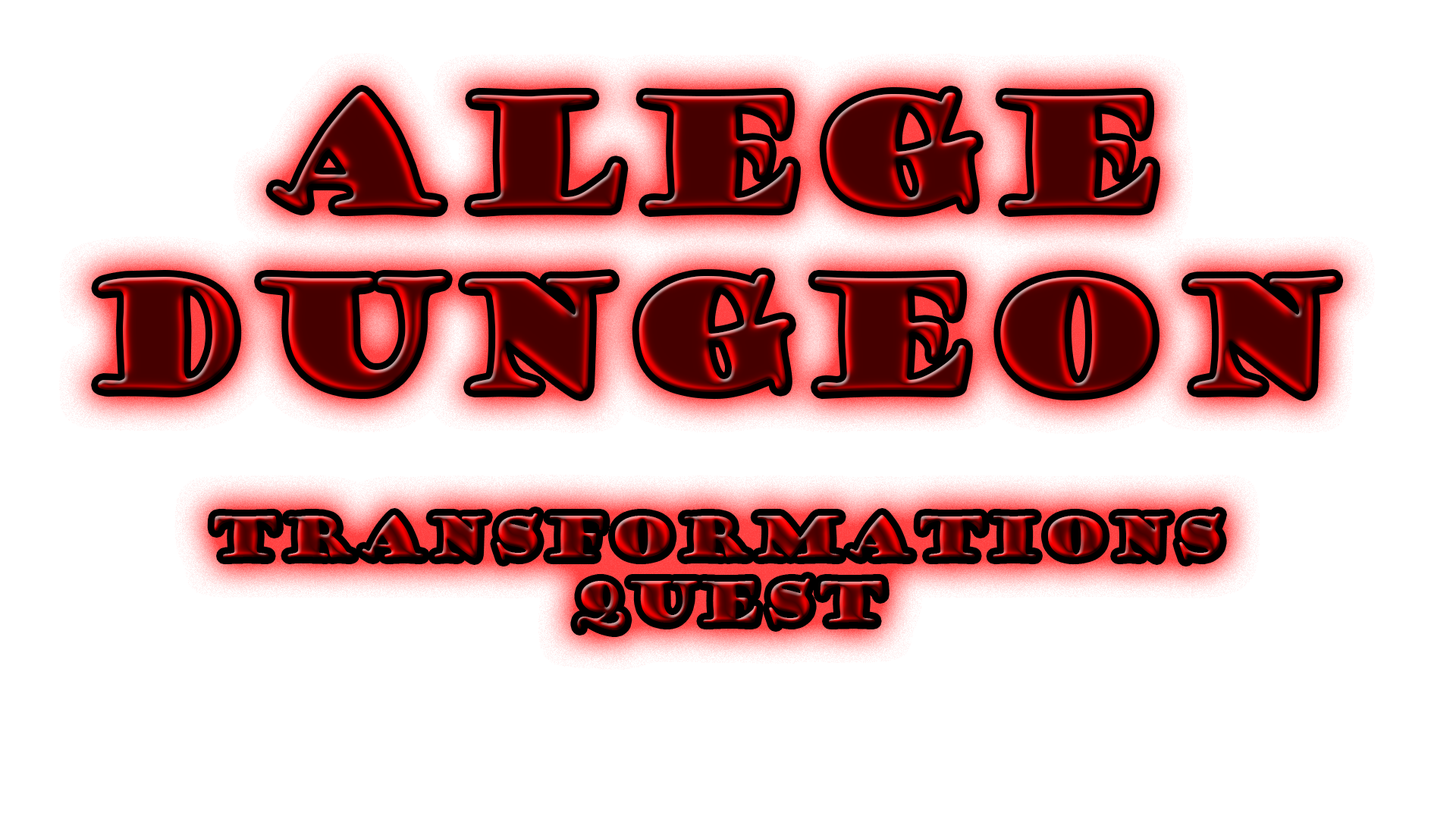
<style>
.page{position:relative;width:1456px;height:819px;background:#ffffff}
.page>*{position:absolute;margin:0}
.t1{font:151.7px "GoudyStout"}
.t2{font:54.6px "GoudyStout"}
</style>
<div class="page">
<p class="t1" style="left:98px;top:91px;width:1239px;height:303px;text-align:center">Alege<br>dungeon</p>
<p class="t2" style="left:214px;top:513px;width:1006px;height:117px;text-align:center">Transformations<br> quest</p>
</div>
